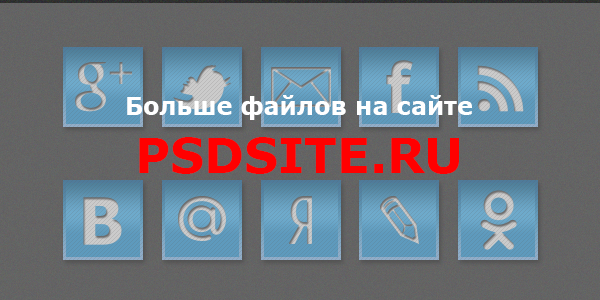
<style>
.page{position:relative;width:600px;height:300px}
.page>*{position:absolute;margin:0}
.t1{font:24px "Verdana-Bold";color:#ffffff}
.t2{font:48px "Verdana-Bold";color:#ff0000}
</style>
<div class="page">
<p class="t1" style="left:127px;top:95px;width:345px;height:79px;text-align:center">Больше файлов на сайте<br><span class="t2">PSDSITE.RU</span></p>
</div>
